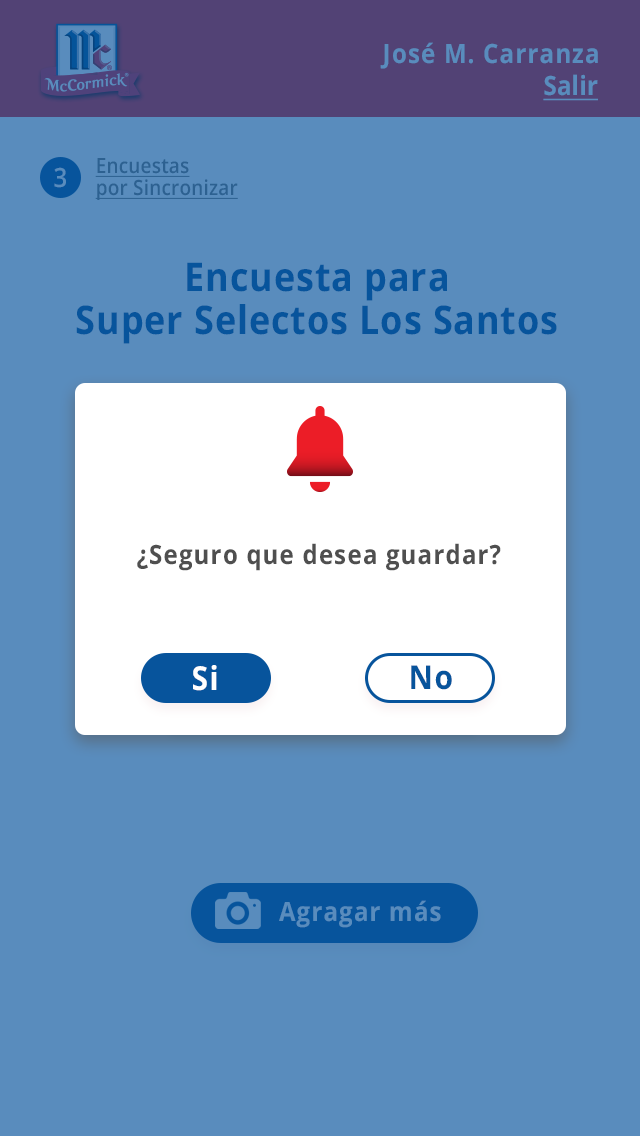
<style>
.page{position:relative;width:640px;height:1136px;background:#598cbd}
.page>*{position:absolute;margin:0}
.t1{font:26.4px "OpenSans-Bold";letter-spacing:0.05em;color:#598cbd;scale:0.91 1}
.t2{font:26.4px "OpenSans-Bold";letter-spacing:0.01em;color:#598cbd;text-decoration:underline;scale:0.91 1}
.t3{font:20.9px/22px "OpenSans-SemiBold";letter-spacing:0.01em;color:#2d6191;text-decoration:underline;scale:0.91 1}
.t4{font:26.4px "OpenSans-SemiBold";letter-spacing:0.05em;color:#598cbd;scale:0.91 1}
.t5{font:39.6px "OpenSans-Bold";letter-spacing:0.025em;color:#07549c;scale:0.91 1}
.t6{font:26.4px "OpenSans-Bold";letter-spacing:0.05em;color:#4f4f4f;scale:0.91 1}
.t7{font:33px "OpenSans-Bold";letter-spacing:0.05em;color:#ffffff;scale:0.91 1}
.t8{font:33px "OpenSans-Bold";letter-spacing:0.05em;color:#07549c;scale:0.91 1}
</style>
<div class="page">
<p class="t1" style="left:380px;top:42px;width:218px;height:27px">José M. Carranza</p>
<p class="t2" style="left:543px;top:74px;width:55px;height:27px">Salir</p>
<p class="t3" style="left:95px;top:158px;width:143px;height:42px">Encuestas<br>por Sincronizar</p>
<p class="t4" style="left:54px;top:167px;width:12px;height:21px">3</p>
<p class="t5" style="left:76px;top:262px;width:481px;height:82px;text-align:center">Encuesta para<br>Super Selectos Los Santos</p>
<p class="t6" style="left:137px;top:543px;width:364px;height:28px">¿Seguro que desea guardar?</p>
<p class="t7" style="left:193px;top:665px;width:24px;height:26px">Si</p>
<p class="t8" style="left:411px;top:665px;width:41px;height:25px">No</p>
<p class="t1" style="left:279px;top:900px;width:162px;height:28px">Agragar más</p>
</div>
